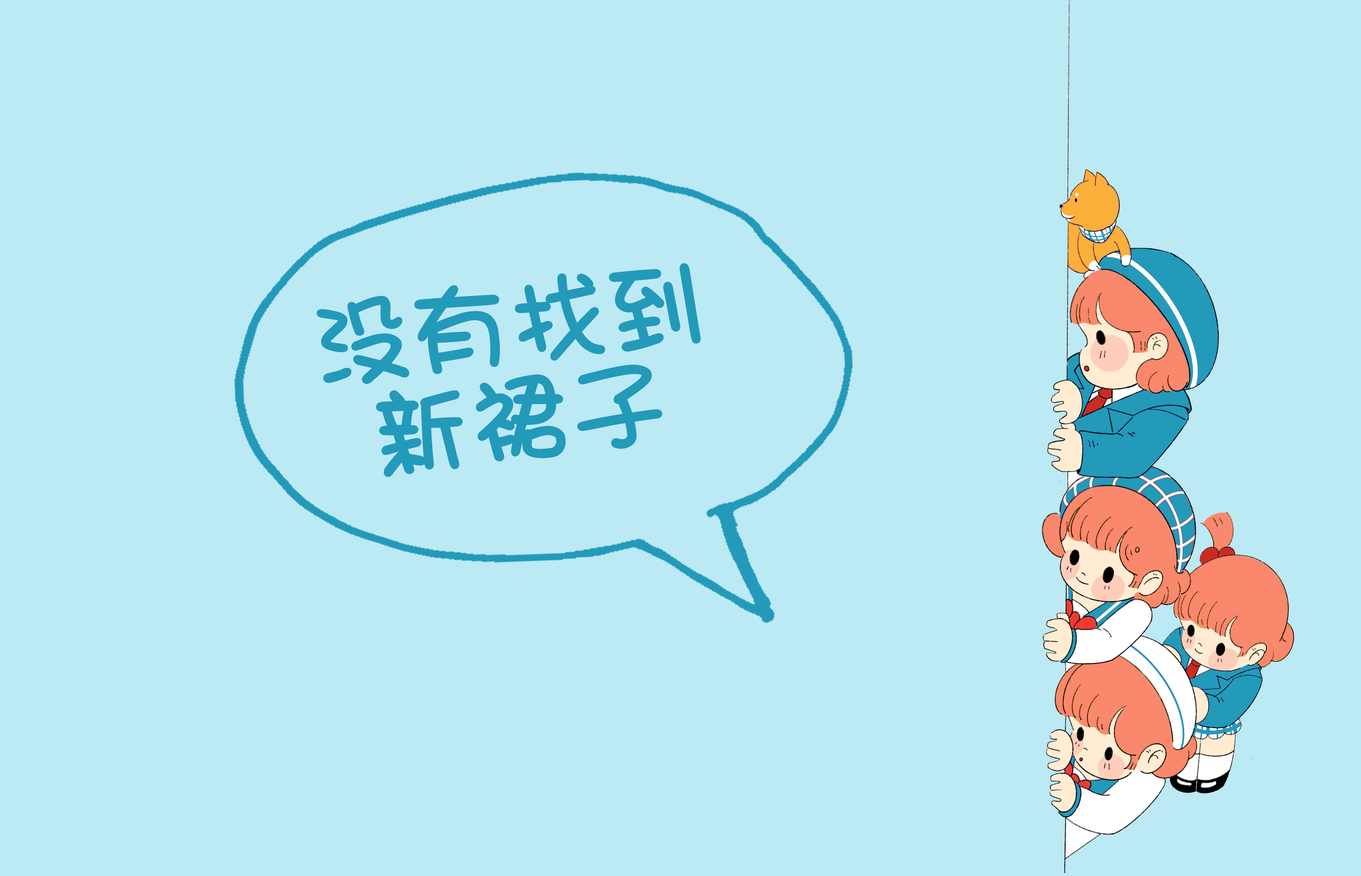
<style>
.page{position:relative;width:1361px;height:876px;background:#bbe9f4}
.page>*{position:absolute;margin:0}
.t1{font:96.5px/96.5px "DFPShaoNvW5";color:#239ab9;font-weight:bold}
</style>
<div class="page">
<p class="t1" style="left:317px;top:263px;width:384px;height:214px;text-align:center;rotate:-7deg">没有找到<br>新裙子</p>
</div>
